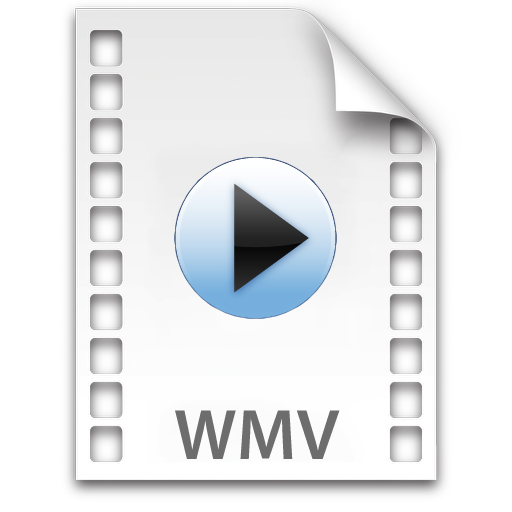
<style>
.page{position:relative;width:512px;height:512px;background:#ffffff}
.page>*{position:absolute;margin:0}
.t1{font:72px "MyriadPro-Semibold";color:#6e6d6d}
</style>
<div class="page">
<p class="t1" style="left:175px;top:410px;width:165px;height:49px">WMV</p>
</div>
